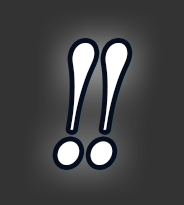
<style>
.page{position:relative;width:184px;height:205px;background:#333333}
.page>*{position:absolute;margin:0}
.t1{font:160px "KochoStd-Heavy";letter-spacing:-0.08em;color:#ffffff;font-style:italic;scale:0.9 1}
</style>
<div class="page">
<p class="t1" style="left:57px;top:43px;width:71px;height:122px">!!</p>
</div>
